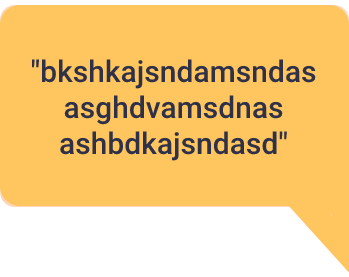
<style>
.page{position:relative;width:349px;height:277px;background:#ffc55e}
.page>*{position:absolute;margin:0}
.t1{font:30px "Roboto-Medium";color:#2f3148}
</style>
<div class="page">
<p class="t1" style="left:31px;top:59px;width:285px;height:102px;text-align:center">"bkshkajsndamsndas<br>asghdvamsdnas<br>ashbdkajsndasd"</p>
</div>
